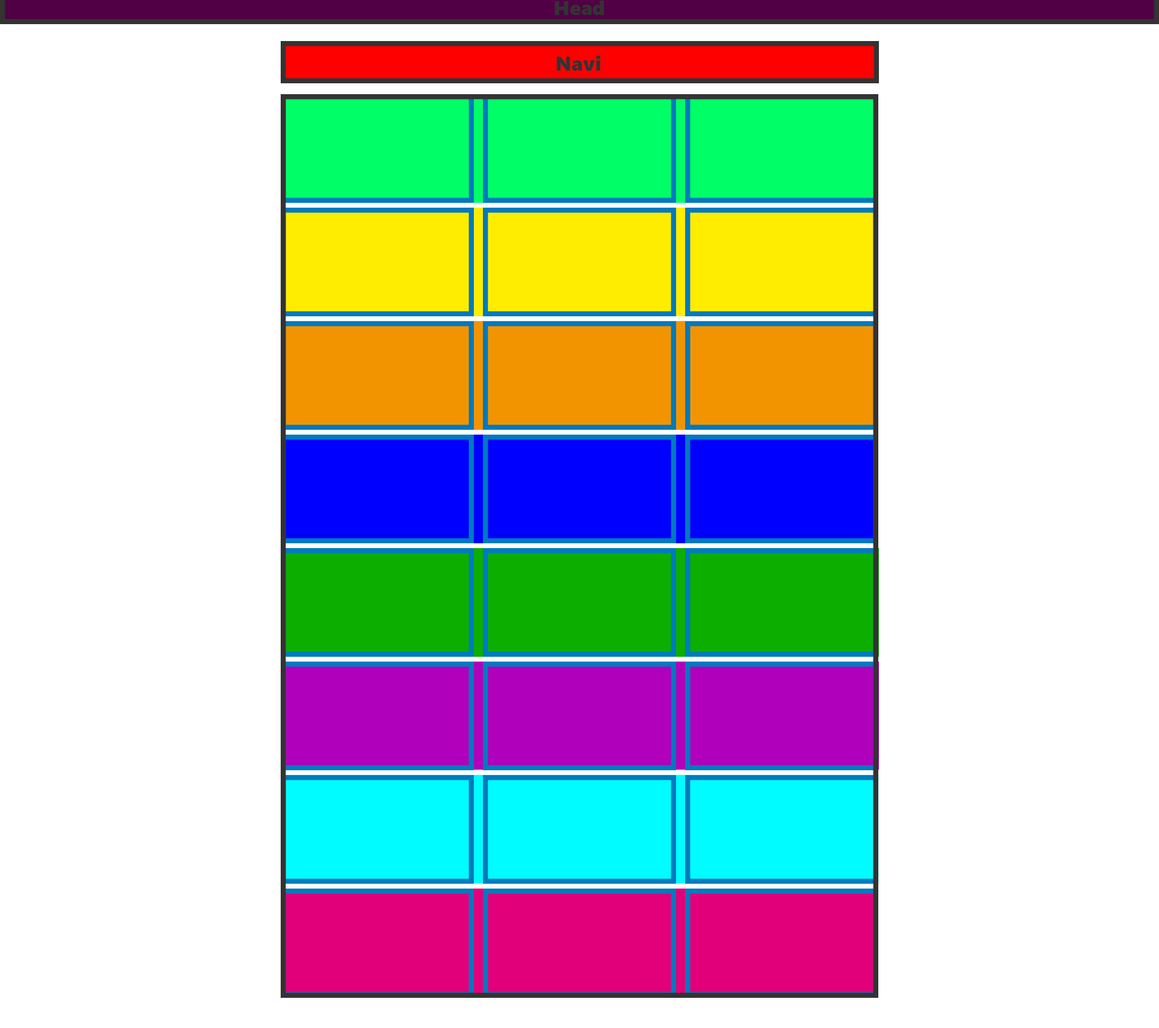
<style>
.page{position:relative;width:1159px;height:1028px;background:#ffffff}
.page>*{position:absolute;margin:0}
.t1{font:20.1px "SegoeUIBlack";color:#333333}
</style>
<div class="page">
<p class="t1" style="left:555px;top:1px;width:49px;height:14px">Head</p>
<p class="t1" style="left:557px;top:56px;width:44px;height:15px">Navi</p>
</div>
